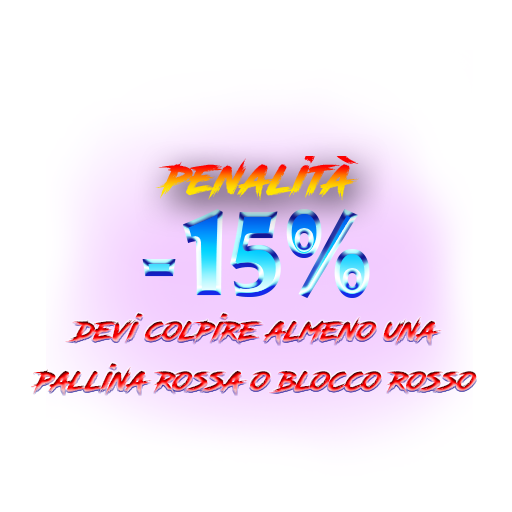
<style>
.page{position:relative;width:512px;height:512px;background:#ffffff}
.page>*{position:absolute;margin:0}
.t1{font:27.8px/50px "RoadRage"}
</style>
<div class="page">
<p class="t1" style="left:31px;top:313px;width:446px;height:82px;text-align:center">devi colpire almeno una<br>pallina rossa o blocco rosso</p>
</div>
